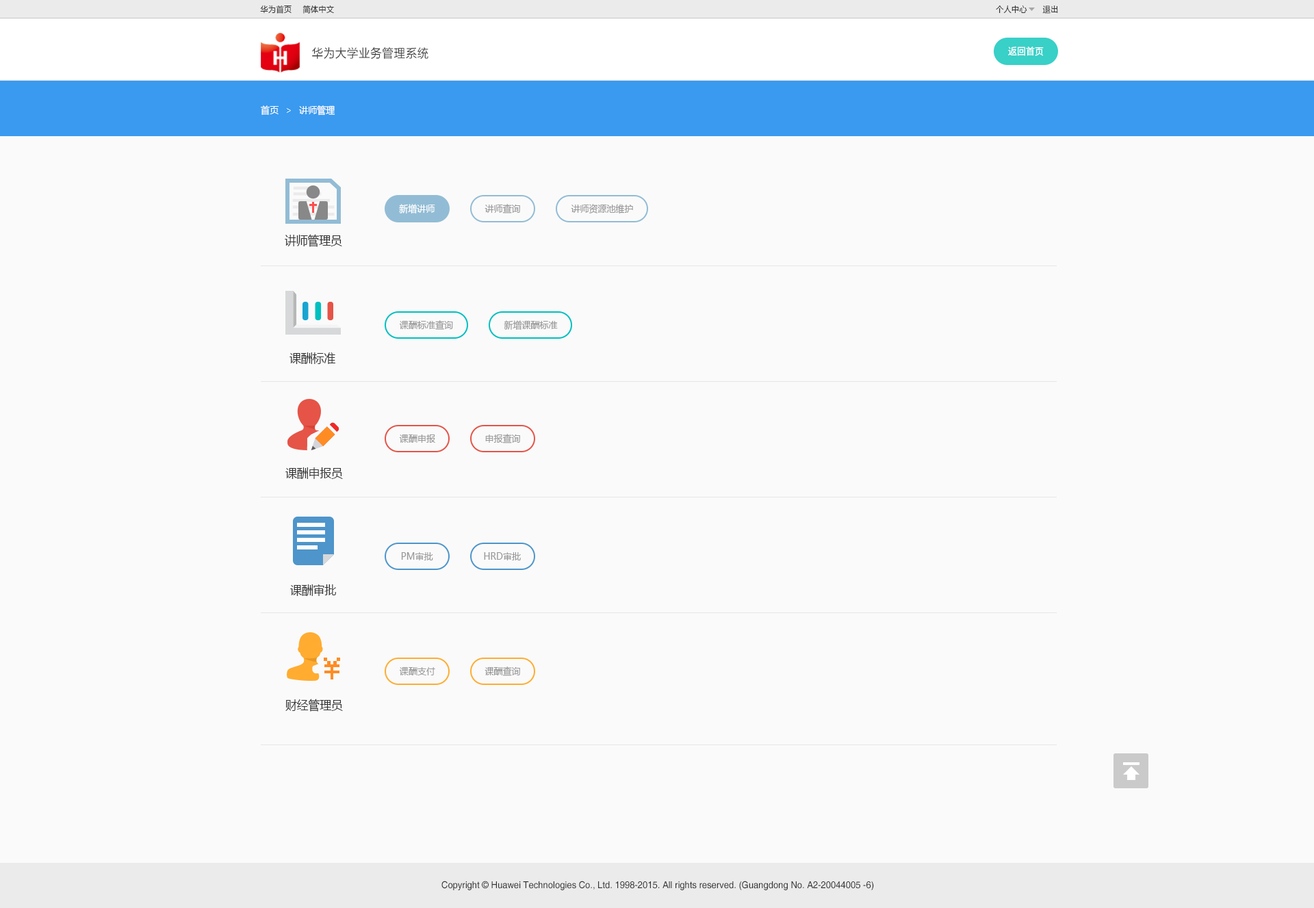
<style>
.page{position:relative;width:1314px;height:908px;background:#fafafa}
.page>*{position:absolute;margin:0}
.t1{font:8.2px "MicrosoftYaHei";letter-spacing:0.025em;color:#333333;scale:0.93 1}
.t2{font:12.3px "FZLTXHK";letter-spacing:0.025em;color:#333333;scale:0.93 1}
.t3{font:9.6px "SourceHanSansCN-Regular";color:#ffffff;scale:0.93 1}
.t4{font:9.6px "MicrosoftYaHei";color:#ffffff;scale:0.93 1}
.t5{font:9.6px "MicrosoftYaHei";color:#999999;scale:0.93 1}
.t6{font:12.3px "MicrosoftYaHei";color:#333333;scale:0.93 1}
.t7{font:9.6px "Helvetica";color:#333333;scale:0.93 1}
</style>
<div class="page">
<p class="t1" style="left:260px;top:5px;width:31px;height:9px">华为首页</p>
<p class="t1" style="left:302px;top:5px;width:32px;height:9px">简体中文</p>
<p class="t1" style="left:995px;top:5px;width:32px;height:8px">个人中心</p>
<p class="t1" style="left:1042px;top:5px;width:16px;height:9px">退出</p>
<p class="t2" style="left:312px;top:47px;width:116px;height:12px">华为大学业务管理系统</p>
<p class="t3" style="left:1008px;top:47px;width:35px;height:9px">返回首页</p>
<p class="t4" style="left:261px;top:105px;width:17px;height:10px">首页</p>
<p class="t4" style="left:299px;top:105px;width:36px;height:11px">讲师管理</p>
<p class="t4" style="left:399px;top:204px;width:36px;height:9px">新增讲师</p>
<p class="t5" style="left:484px;top:204px;width:36px;height:9px">讲师查询</p>
<p class="t5" style="left:571px;top:204px;width:62px;height:10px">讲师资源池维护</p>
<p class="t6" style="left:285px;top:234px;width:57px;height:13px">讲师管理员</p>
<p class="t5" style="left:399px;top:320px;width:54px;height:10px">课酬标准查询</p>
<p class="t5" style="left:504px;top:320px;width:54px;height:10px">新增课酬标准</p>
<p class="t6" style="left:289px;top:352px;width:46px;height:12px">课酬标准</p>
<p class="t5" style="left:399px;top:434px;width:36px;height:9px">课酬申报</p>
<p class="t5" style="left:485px;top:434px;width:35px;height:9px">申报查询</p>
<p class="t6" style="left:285px;top:467px;width:58px;height:12px">课酬申报员</p>
<p class="t5" style="left:401px;top:552px;width:32px;height:8px">PM审批</p>
<p class="t5" style="left:484px;top:552px;width:37px;height:8px">HRD审批</p>
<p class="t6" style="left:290px;top:584px;width:46px;height:12px">课酬审批</p>
<p class="t5" style="left:399px;top:667px;width:36px;height:8px">课酬支付</p>
<p class="t5" style="left:484px;top:666px;width:36px;height:10px">课酬查询</p>
<p class="t6" style="left:285px;top:698px;width:58px;height:13px">财经管理员</p>
<p class="t7" style="left:441px;top:880px;width:433px;height:10px">Copyright © Huawei Technologies Co., Ltd. 1998-2015. All rights reserved. (Guangdong No. A2-20044005 -6)</p>
</div>
